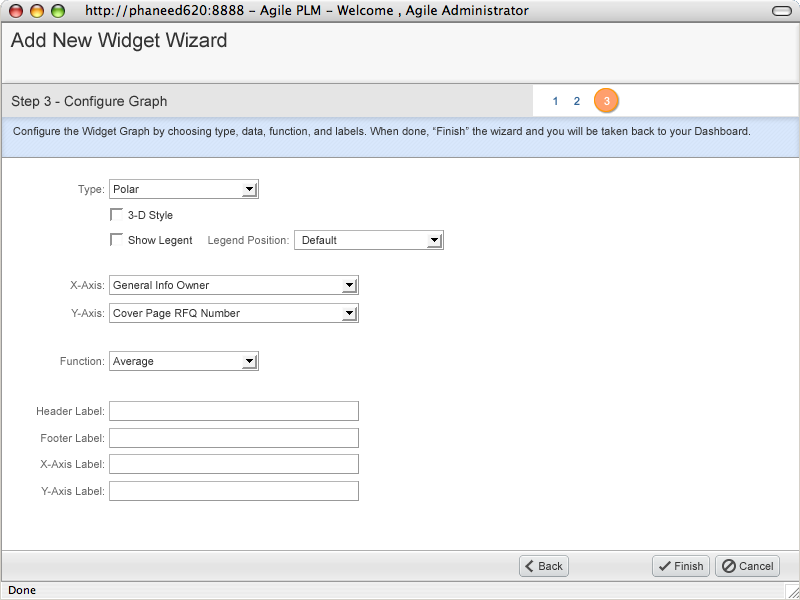
<style>
.page{position:relative;width:800px;height:600px;background:#ffffff}
.page>*{position:absolute;margin:0}
.t1{font:20px "ArialMT";color:#333333}
.t2{font:14px "ArialMT";color:#333333}
.t3{font:11px "ArialMT";color:#336699}
.t4{font:11px "ArialMT";color:#ffffff}
.t5{font:11px "ArialMT";color:#333333}
.t6{font:11px "ArialMT";color:#666666}
</style>
<div class="page">
<p class="t1" style="left:10px;top:32px;width:217px;height:20px">Add New Widget Wizard</p>
<p class="t2" style="left:11px;top:95px;width:156px;height:14px">Step 3 - Configure Graph</p>
<p class="t3" style="left:553px;top:96px;width:27px;height:9px">1     2</p>
<p class="t4" style="left:604px;top:96px;width:6px;height:10px"><span class="t3">      </span> 3</p>
<p class="t5" style="left:13px;top:127px;width:737px;height:11px">Configure the Widget Graph by choosing type, data, function, and labels. When done, “Finish” the wizard and you will be taken back to your Dashboard.</p>
<p class="t6" style="left:78px;top:185px;width:26px;height:11px">Type:</p>
<p class="t5" style="left:114px;top:185px;width:25px;height:8px">Polar</p>
<p class="t5" style="left:128px;top:211px;width:45px;height:11px">3-D Style</p>
<p class="t6" style="left:128px;top:236px;width:209px;height:11px"><span class="t5">Show Legent     </span>Legend Position: <span class="t5">   Default</span></p>
<p class="t6" style="left:70px;top:281px;width:34px;height:8px">X-Axis:</p>
<p class="t5" style="left:113px;top:281px;width:97px;height:8px">General Info Owner</p>
<p class="t6" style="left:71px;top:309px;width:33px;height:8px">Y-Axis:</p>
<p class="t5" style="left:113px;top:309px;width:127px;height:11px">Cover Page RFQ Number</p>
<p class="t6" style="left:60px;top:357px;width:44px;height:8px">Function:</p>
<p class="t5" style="left:113px;top:357px;width:41px;height:11px">Average</p>
<p class="t6" style="left:37px;top:407px;width:67px;height:8px">Header Label:</p>
<p class="t6" style="left:41px;top:434px;width:63px;height:8px">Footer Label:</p>
<p class="t6" style="left:40px;top:460px;width:64px;height:8px">X-Axis Label:</p>
<p class="t6" style="left:41px;top:487px;width:63px;height:8px">Y-Axis Label:</p>
<p class="t5" style="left:539px;top:562px;width:24px;height:8px">Back</p>
<p class="t5" style="left:675px;top:562px;width:28px;height:8px">Finish</p>
<p class="t5" style="left:739px;top:562px;width:34px;height:8px">Cancel</p>
</div>
